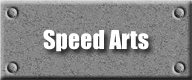
<style>
.page{position:relative;width:192px;height:80px}
.page>*{position:absolute;margin:0}
.t1{font:24px "Impact";color:#ffffff}
</style>
<div class="page">
<p class="t1" style="left:43px;top:29px;width:106px;height:23px">Speed Arts</p>
</div>
